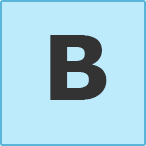
<style>
.page{position:relative;width:146px;height:146px;background:#beebfc}
.page>*{position:absolute;margin:0}
.t1{font:90px "Verdana-Bold";color:#333333}
</style>
<div class="page">
<p class="t1" style="left:50px;top:35px;width:57px;height:65px">B</p>
</div>
